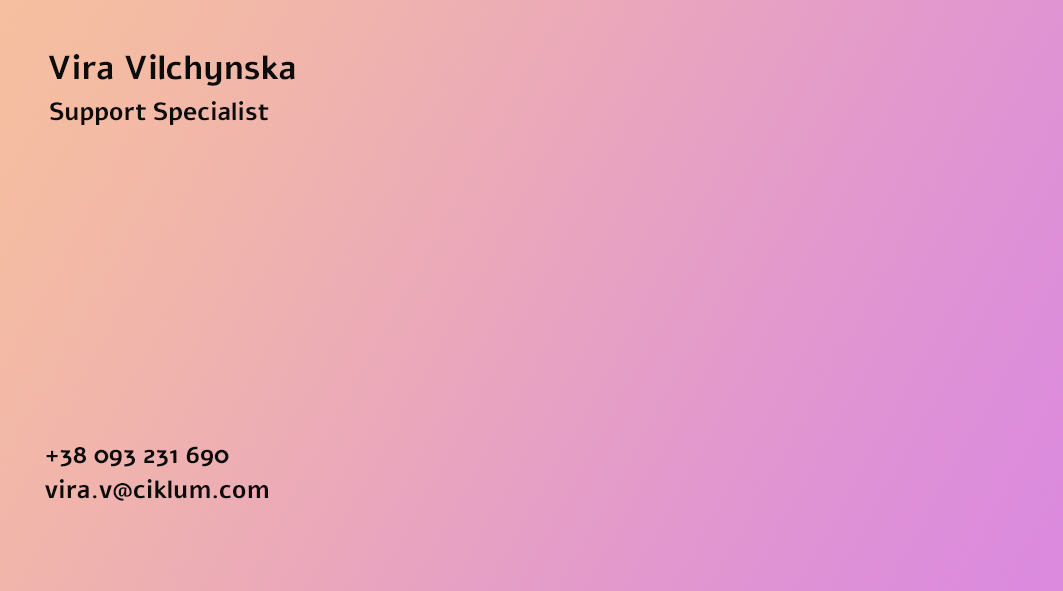
<style>
.page{position:relative;width:1063px;height:591px}
.page>*{position:absolute;margin:0}
.t1{font:33.3px "Alef-Bold";letter-spacing:-0.01em;color:#0b0c0c}
.t2{font:25px "Alef-Bold";letter-spacing:-0.01em;color:#0b0c0c}
</style>
<div class="page">
<p class="t1" style="left:48px;top:54px;width:247px;height:32px">Vira Vilchynska</p>
<p class="t2" style="left:50px;top:101px;width:219px;height:24px">Support Specialist</p>
<p class="t2" style="left:46px;top:446px;width:183px;height:21px">+38 093 231 690</p>
<p class="t2" style="left:45px;top:479px;width:223px;height:22px">vira.v@ciklum.com</p>
</div>
